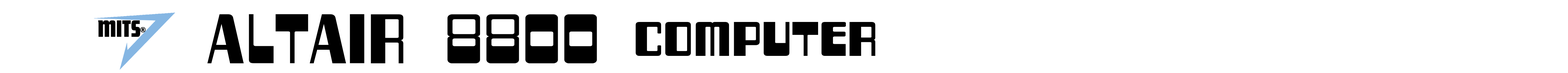
<style>
.page{position:relative;width:1568px;height:73px;background:#ffffff}
.page>*{position:absolute;margin:0}
.t1{font:65px "TwoFiftySixBytes-Regular";letter-spacing:-0.01em;color:#000000;scale:1.24 1}
.t2{font:65px "TwoFiftySixBytes-Regular";letter-spacing:0.005em;color:#000000;scale:1.24 1}
.t3{font:10.1px "MiSans-Heavy";letter-spacing:-0.01em;color:#000000}
.t4{font:60px "TwoFiftySixBytes-Regular";letter-spacing:-0.01em;color:#000000;scale:1.05 1}
</style>
<div class="page">
<p class="t1" style="left:207px;top:14px;width:390px;height:49px"><span class="t2">A</span>LTAIR  8800</p>
<p class="t3" style="left:140px;top:27px;width:6px;height:6px">®</p>
<p class="t4" style="left:636px;top:22px;width:239px;height:34px">computer</p>
</div>
